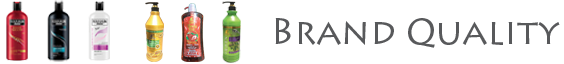
<style>
.page{position:relative;width:564px;height:64px;background:#ffffff}
.page>*{position:absolute;margin:0}
.t1{font:35.6px "LithosPro-Regular";color:#58595b}
</style>
<div class="page">
<p class="t1" style="left:275px;top:18px;width:285px;height:30px">Brand Quality</p>
</div>
